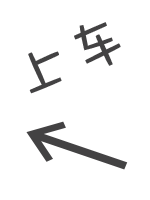
<style>
.page{position:relative;width:150px;height:200px;background:#ffffff}
.page>*{position:absolute;margin:0}
.t1{font:60px "DFWaWaSC-W5";color:#434243}
.t2{font:105.6px "DFWaWaSC-W5";color:#434243;scale:1.08 1}
</style>
<div class="page">
<p class="t1" style="left:28px;top:22px;width:93px;height:72px;rotate:-24deg">上车</p>
<p class="t2" style="left:26px;top:121px;width:102px;height:49px;rotate:19deg">←</p>
</div>
